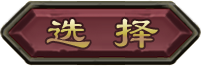
<style>
.page{position:relative;width:201px;height:66px}
.page>*{position:absolute;margin:0}
.t1{font:45.7px "LiSu"}
</style>
<div class="page">
<p class="t1" style="left:46px;top:18px;width:112px;height:30px">选 择</p>
</div>
